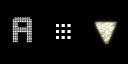
<style>
.page{position:relative;width:128px;height:64px;background:#000000}
.page>*{position:absolute;margin:0}
.t1{font:16.8px "TripleDotDigital-7";color:#ffffff;scale:1.04 1}
.t2{font:59.7px "TripleDotDigital-7";color:#ffffff;scale:0.96 1}
</style>
<div class="page">
<p class="t1" style="left:12px;top:17px;width:20px;height:26px">A</p>
<p class="t2" style="left:56px;top:24px;width:15px;height:15px">.</p>
</div>
